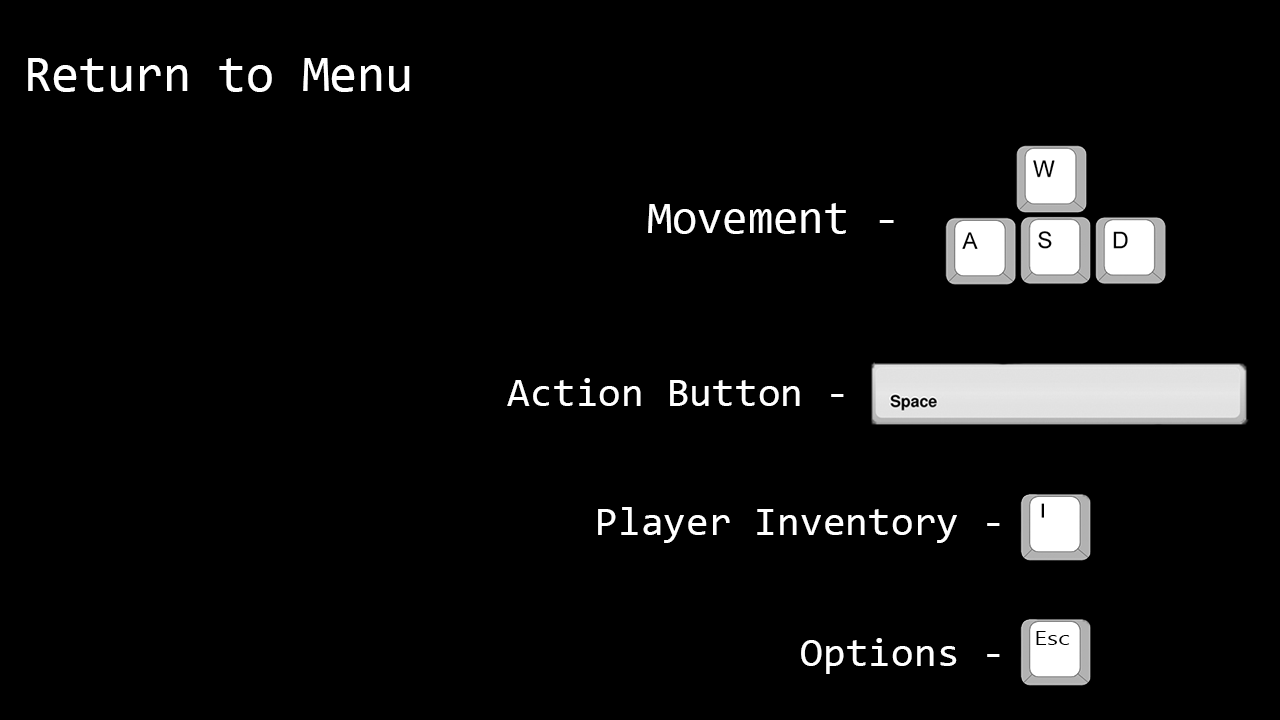
<style>
.page{position:relative;width:1280px;height:720px;background:#000000}
.page>*{position:absolute;margin:0}
.t1{font:50.6px "Consolas";color:#ffffff}
.t2{font:46px "Consolas";color:#ffffff}
.t3{font:41.4px "Consolas";color:#ffffff}
.t4{font:20px "SegoeUI";color:#000000;scale:1.29 1}
</style>
<div class="page">
<p class="t1" style="left:28px;top:58px;width:382px;height:34px">Return to Menu</p>
<p class="t2" style="left:648px;top:203px;width:246px;height:31px">- Movement</p>
<p class="t3" style="left:507px;top:378px;width:337px;height:28px">- Action Button</p>
<p class="t3" style="left:598px;top:507px;width:402px;height:36px">- Player Inventory</p>
<p class="t3" style="left:801px;top:638px;width:199px;height:36px">- Options</p>
<p class="t4" style="left:1036px;top:631px;width:34px;height:14px">Esc</p>
</div>
